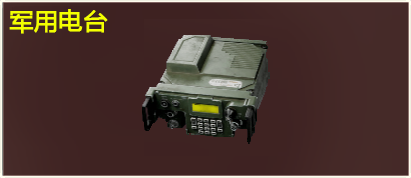
<style>
.page{position:relative;width:411px;height:178px}
.page>*{position:absolute;margin:0}
.t1{font:24px "MicrosoftYaHeiUI";color:#f4ff00;font-weight:bold}
</style>
<div class="page">
<p class="t1" style="left:9px;top:9px;width:99px;height:25px">军用电台</p>
</div>
